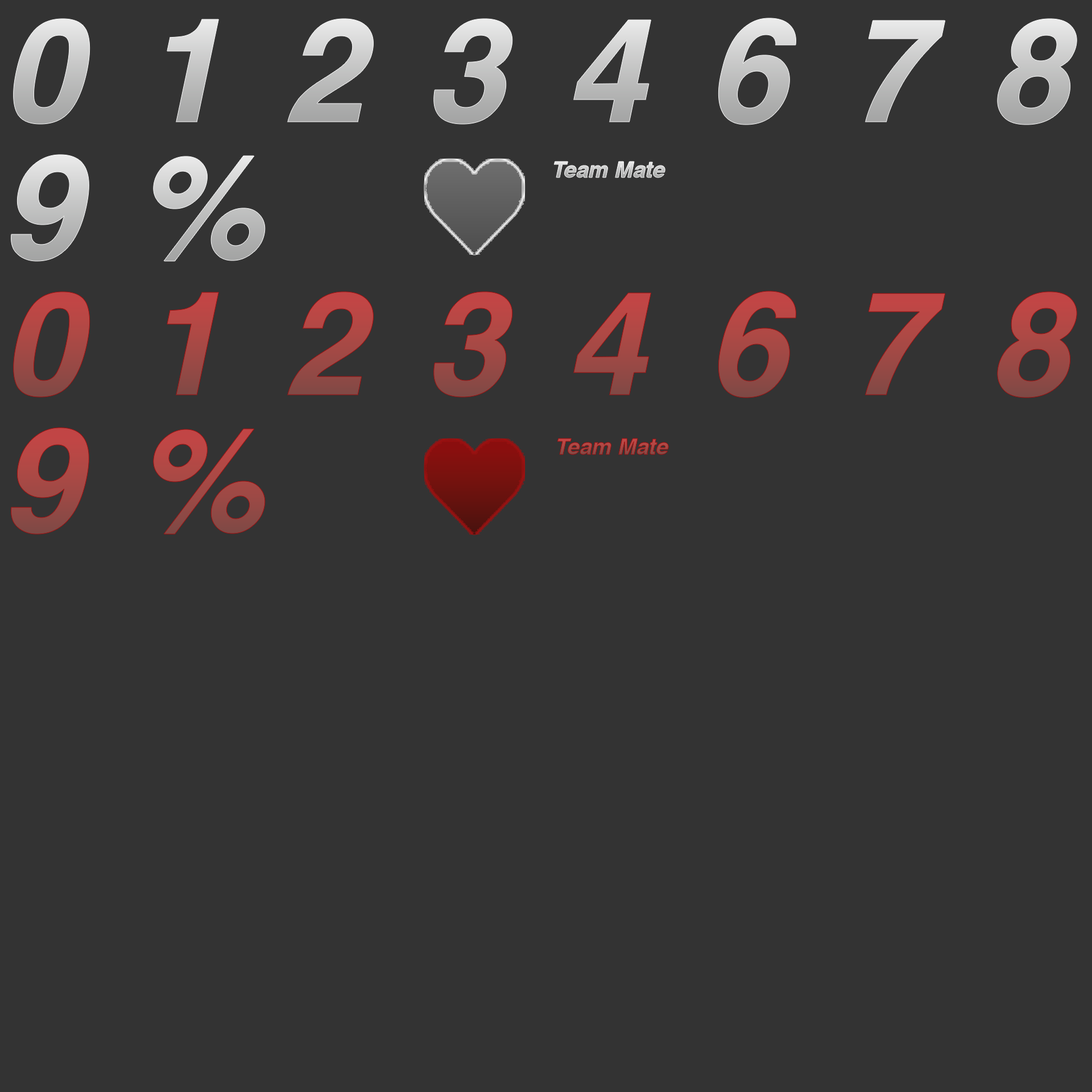
<style>
.page{position:relative;width:1092px;height:1092px;background:#333333}
.page>*{position:absolute;margin:0}
.t1{font:144.5px "Helvetica-BoldOblique";letter-spacing:0.42em}
.t2{font:144.5px "Helvetica-BoldOblique";letter-spacing:0.38em}
.t3{font:22px "Helvetica-BoldOblique"}
</style>
<div class="page">
<p class="t1" style="left:13px;top:18px;width:1064px;height:107px">01234678</p>
<p class="t2" style="left:11px;top:155px;width:254px;height:106px">9%</p>
<p class="t3" style="left:554px;top:162px;width:111px;height:15px">Team Mate</p>
<p class="t1" style="left:13px;top:291px;width:1064px;height:107px">01234678</p>
<p class="t2" style="left:11px;top:428px;width:254px;height:106px">9%</p>
<p class="t3" style="left:557px;top:439px;width:112px;height:15px">Team Mate</p>
</div>
